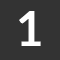
<style>
.page{position:relative;width:60px;height:60px;background:#333333}
.page>*{position:absolute;margin:0}
.t1{font:48px "Lato-Bold";color:#ffffff}
</style>
<div class="page">
<p class="t1" style="left:19px;top:11px;width:22px;height:35px">1</p>
</div>
